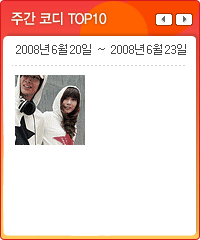
<style>
.page{position:relative;width:200px;height:240px;background:#ffffff}
.page>*{position:absolute;margin:0}
.t1{font:14.8px "YDIYGO340";letter-spacing:-0.025em;color:#ffffff;scale:0.91 1}
.t2{font:12px "Dotum";color:#474747}
</style>
<div class="page">
<p class="t1" style="left:11px;top:12px;width:96px;height:13px">주간 코디 TOP10</p>
<p class="t2" style="left:16px;top:44px;width:170px;height:11px">2008년6월20일 ~ 2008년6월23일</p>
</div>
